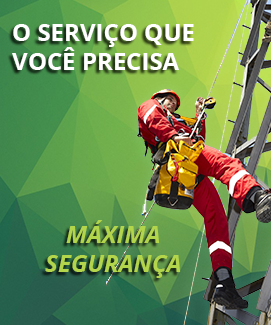
<style>
.page{position:relative;width:271px;height:325px}
.page>*{position:absolute;margin:0}
.t1{font:24px "OpenSans-Bold";color:#ffffff;text-transform:uppercase}
.t2{font:24px "OpenSans-BoldItalic";color:#b3d54c;text-transform:uppercase}
</style>
<div class="page">
<p class="t1" style="left:12px;top:24px;width:182px;height:254px">O serviço que você precisa <br><br> <br><span class="t2"><br><br><br>máxima segurança</span></p>
</div>
